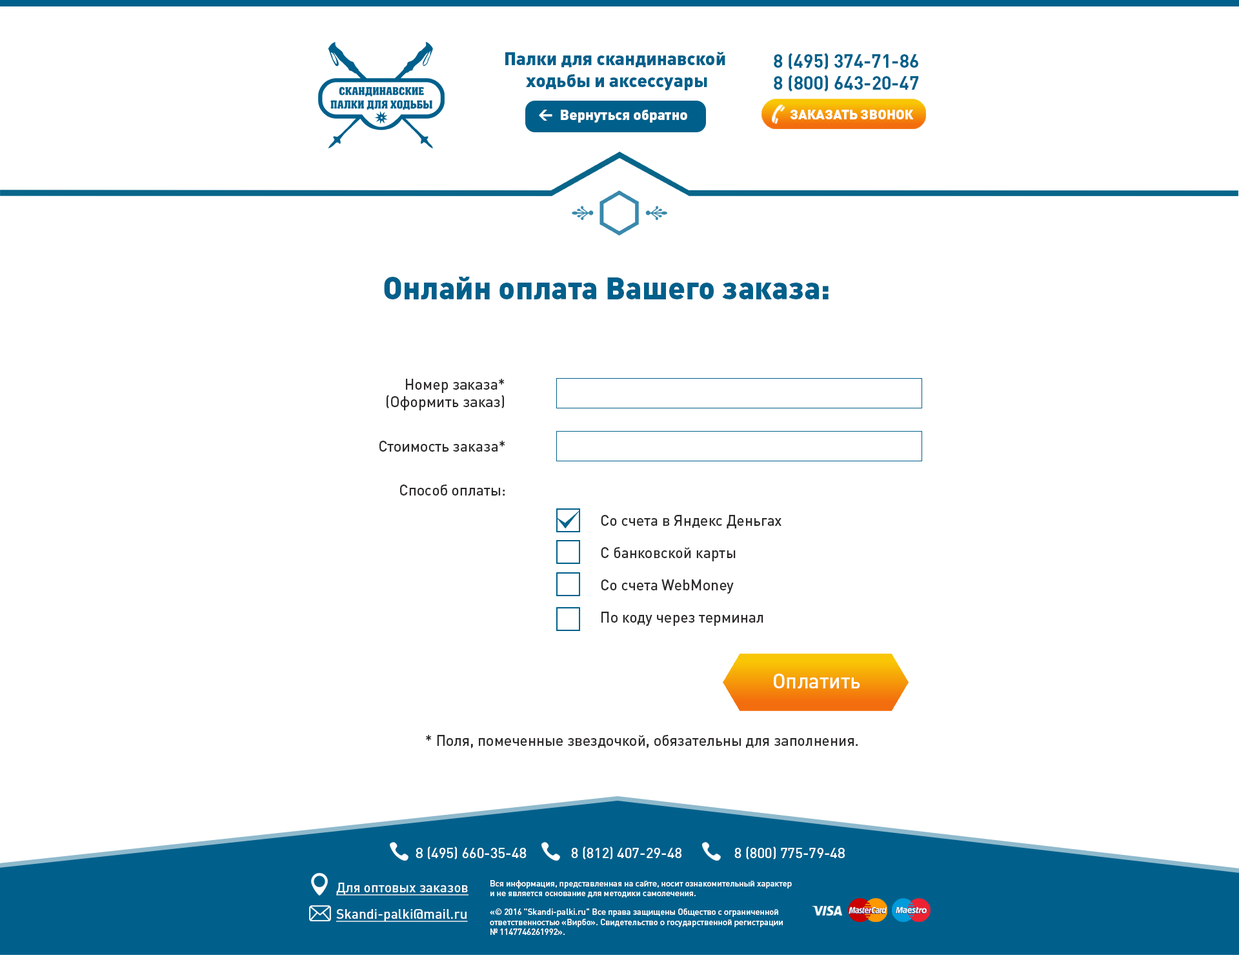
<style>
.page{position:relative;width:1239px;height:962px;background:#ffffff}
.page>*{position:absolute;margin:0}
.t1{font:18.1px "DINPro-Black";color:#00608b}
.t2{font:18.4px "DINPro-Bold";color:#00608b}
.t3{font:14.2px "DINPro-Black";color:#ffffff}
.t4{font:13.7px "DINPro-Black";color:#ffffff}
.t5{font:31px "DINPro-Black";color:#00608b}
.t6{font:14.8px "DINPro-Medium";color:#2b2a29}
.t7{font:14.8px/32.3px "DINPro-Medium";color:#2b2a29}
.t8{font:20.7px "DINPro-Medium";color:#ffffff}
.t9{font:14.2px "DINPro-Medium";color:#ffffff}
.t10{font:8.4px "DINPro-Medium";color:#ffffff}
.t11{font:13.6px "DINPro-Medium";color:#ffffff;text-decoration:underline}
</style>
<div class="page">
<p class="t1" style="left:505px;top:52px;width:220px;height:38px;text-align:center">Палки для скандинавской <br>ходьбы и аксессуары</p>
<p class="t2" style="left:774px;top:53px;width:145px;height:39px;text-align:center">8 (495) 374-71-86<br>8 (800) 643-20-47</p>
<p class="t3" style="left:539px;top:110px;width:13px;height:11px">←</p>
<p class="t3" style="left:561px;top:110px;width:126px;height:13px">Вернуться обратно</p>
<p class="t4" style="left:790px;top:110px;width:124px;height:9px">ЗАКАЗАТЬ ЗВОНОК</p>
<p class="t5" style="left:384px;top:276px;width:445px;height:23px">Онлайн оплата Вашего заказа:</p>
<p class="t6" style="left:387px;top:379px;width:118px;height:31px;text-align:right">Номер заказа*<br>(Оформить заказ)</p>
<p class="t6" style="left:379px;top:441px;width:126px;height:11px">Стоимость заказа*</p>
<p class="t6" style="left:400px;top:485px;width:105px;height:11px">Способ оплаты:</p>
<p class="t7" style="left:601px;top:515px;width:181px;height:111px">Со счета в Яндекс Деньгах<br>С банковской карты<br>Со счета WebMoney<br>По коду через терминал</p>
<p class="t8" style="left:774px;top:674px;width:86px;height:15px">Оплатить</p>
<p class="t6" style="left:426px;top:735px;width:432px;height:14px">* Поля, помеченные звездочкой, обязательны для заполнения.</p>
<p class="t9" style="left:416px;top:847px;width:111px;height:13px">8 (495) 660-35-48</p>
<p class="t9" style="left:571px;top:847px;width:111px;height:13px">8 (812) 407-29-48</p>
<p class="t9" style="left:734px;top:847px;width:111px;height:13px">8 (800) 775-79-48</p>
<p class="t10" style="left:491px;top:880px;width:301px;height:18px">Вся информация, представленная на сайте, носит ознакомительный характер<br>и не является основание для методики самолечения.</p>
<p class="t11" style="left:336px;top:883px;width:133px;height:13px">Для оптовых заказов</p>
<p class="t11" style="left:336px;top:909px;width:132px;height:13px">Skandi-palki@mail.ru</p>
<p class="t10" style="left:490px;top:909px;width:293px;height:26px">«© 2016 "Skandi-palki.ru" Все права защищены Общество с ограниченной <br>ответственностью «Вирбо». Свидетельство о государственной регистрации <br>№ 1147746261992».</p>
</div>
